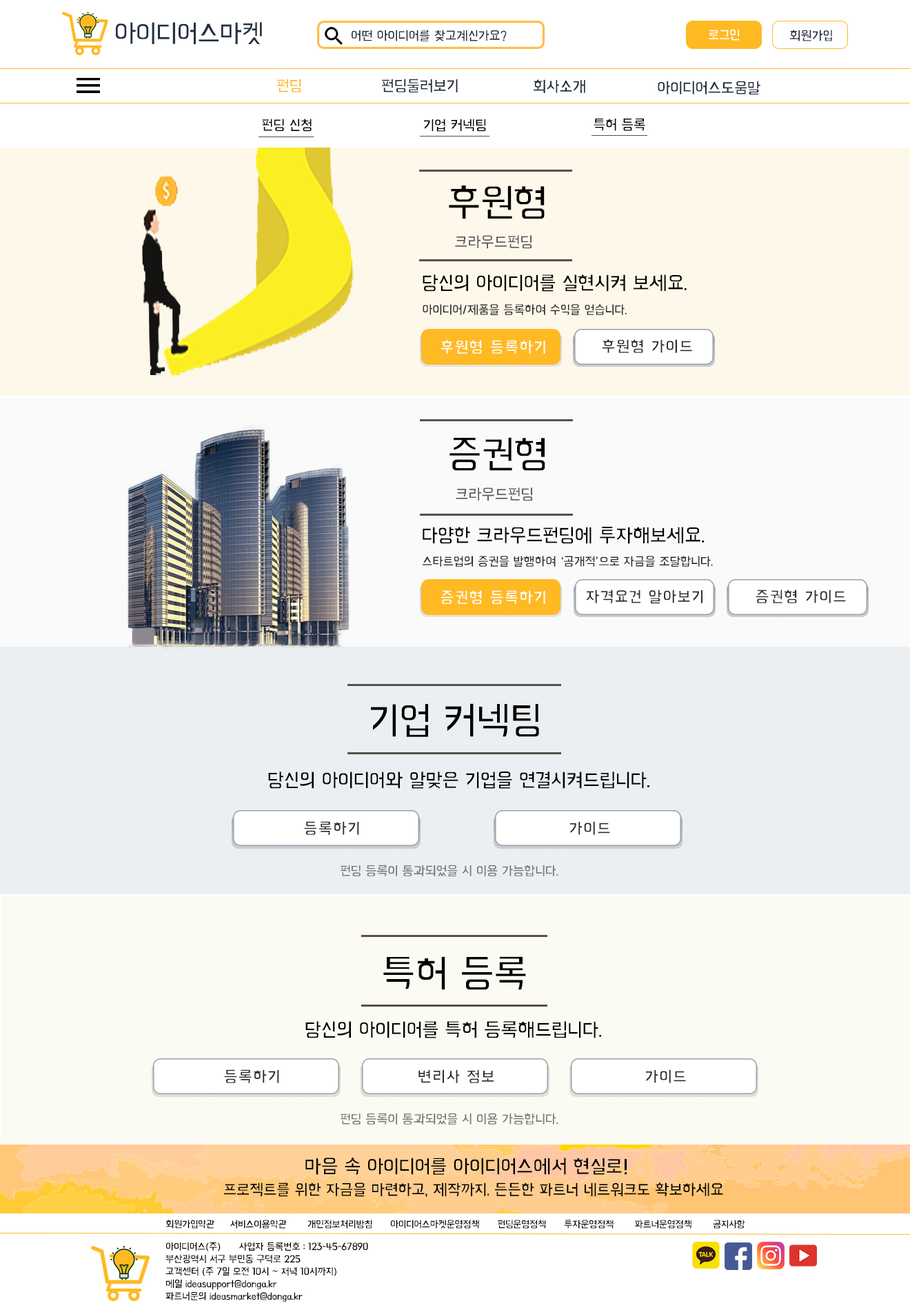
<style>
.page{position:relative;width:910px;height:1310px}
.page>*{position:absolute;margin:0}
.t1{font:27.6px "BMHANNAAir";letter-spacing:-0.03em;color:#233041}
.t2{font:13.8px "BMHANNAAir";letter-spacing:-0.02em;color:#202d3e}
.t3{font:13.8px "BMHANNAAir";letter-spacing:-0.02em;color:#ffffff}
.t4{font:16.5px "BMHANNAAir";letter-spacing:-0.02em;color:#ffb923}
.t5{font:16.5px "BMHANNAAir";letter-spacing:-0.02em;color:#202d3e}
.t6{font:15.2px "BMHANNAAir";letter-spacing:-0.02em;color:#000000}
.t7{font:41.4px "BMHANNAAir";letter-spacing:-0.02em;color:#000000}
.t8{font:16.5px "BMHANNAAir";letter-spacing:-0.02em;color:#5f5f5f}
.t9{font:20.7px "BMHANNAAir";letter-spacing:-0.02em;color:#000000}
.t10{font:13.1px "BMHANNAAir";letter-spacing:-0.02em;color:#2c2b2b}
.t11{font:16.5px "BMHANNAAir";letter-spacing:0.05em;color:#ffffff}
.t12{font:16.5px "BMHANNAAir";letter-spacing:0.05em;color:#2d2c2c}
.t13{font:13.8px "BMHANNAAir";letter-spacing:-0.02em;color:#777777}
.t14{font:10.3px "BMHANNAAir";letter-spacing:-0.025em;color:#000000}
.t15{font:10.3px "BMHANNAAir";letter-spacing:-0.02em;color:#000000}
</style>
<div class="page">
<p class="t1" style="left:116px;top:22px;width:146px;height:22px">아이디어스마켓</p>
<p class="t2" style="left:352px;top:30px;width:155px;height:11px">어떤 아이디어를 찾고계신가요?</p>
<p class="t3" style="left:709px;top:29px;width:30px;height:12px">로그인</p>
<p class="t2" style="left:790px;top:30px;width:42px;height:11px">회원가입</p>
<p class="t4" style="left:277px;top:79px;width:24px;height:13px">펀딩</p>
<p class="t5" style="left:382px;top:79px;width:76px;height:13px">펀딩둘러보기</p>
<p class="t5" style="left:534px;top:79px;width:51px;height:14px">회사소개</p>
<p class="t5" style="left:658px;top:81px;width:103px;height:13px">아이디어스도움말</p>
<p class="t6" style="left:262px;top:119px;width:50px;height:13px">펀딩 신청</p>
<p class="t6" style="left:424px;top:119px;width:62px;height:13px">기업 커넥팅</p>
<p class="t6" style="left:594px;top:119px;width:51px;height:12px">특허 등록</p>
<p class="t7" style="left:449px;top:185px;width:96px;height:34px">후원형</p>
<p class="t8" style="left:455px;top:235px;width:77px;height:14px">크라우드펀딩</p>
<p class="t9" style="left:423px;top:274px;width:264px;height:18px">당신의 아이디어를 실현시켜 보세요.</p>
<p class="t10" style="left:423px;top:304px;width:204px;height:11px">아이디어/제품을 등록하여 수익을 얻습니다.</p>
<p class="t11" style="left:441px;top:340px;width:104px;height:14px">후원형 등록하기</p>
<p class="t12" style="left:602px;top:339px;width:90px;height:14px">후원형 가이드</p>
<p class="t7" style="left:450px;top:437px;width:95px;height:34px">증권형</p>
<p class="t8" style="left:456px;top:487px;width:77px;height:14px">크라우드펀딩</p>
<p class="t9" style="left:423px;top:527px;width:281px;height:17px">다양한 크라우드펀딩에 투자해보세요.</p>
<p class="t10" style="left:423px;top:556px;width:290px;height:11px">스타트업의 증권을 발행하여 ‘공개적’으로 자금을 조달합니다.</p>
<p class="t11" style="left:441px;top:590px;width:104px;height:14px">증권형 등록하기</p>
<p class="t12" style="left:587px;top:590px;width:116px;height:14px">자격요건 알아보기</p>
<p class="t12" style="left:756px;top:590px;width:90px;height:13px">증권형 가이드</p>
<p class="t7" style="left:371px;top:703px;width:168px;height:34px">기업 커넥팅</p>
<p class="t9" style="left:268px;top:772px;width:382px;height:17px">당신의 아이디어와 알맞은 기업을 연결시켜드립니다.</p>
<p class="t12" style="left:304px;top:821px;width:55px;height:14px">등록하기</p>
<p class="t12" style="left:570px;top:821px;width:40px;height:14px">가이드</p>
<p class="t13" style="left:341px;top:865px;width:218px;height:11px">펀딩 등록이 통과되었을 시 이용 가능합니다.</p>
<p class="t7" style="left:383px;top:956px;width:143px;height:34px">특허 등록</p>
<p class="t9" style="left:305px;top:1021px;width:296px;height:17px">당신의 아이디어를 특허 등록해드립니다.</p>
<p class="t12" style="left:224px;top:1069px;width:55px;height:14px">등록하기</p>
<p class="t12" style="left:419px;top:1069px;width:75px;height:14px">변리사 정보</p>
<p class="t12" style="left:646px;top:1069px;width:40px;height:14px">가이드</p>
<p class="t13" style="left:341px;top:1113px;width:218px;height:12px">펀딩 등록이 통과되었을 시 이용 가능합니다.</p>
<p class="t14" style="left:165px;top:1220px;width:580px;height:9px">회원가입약관       서비스이용약관       개인정보처리방침      아이디어스마켓운영정책      펀딩운영정책      투자운영정책       파트너운영정책       공지사항</p>
<p class="t15" style="left:165px;top:1242px;width:203px;height:60px">아이디어스(주)      사업자 등록번호 : 123-45-67890  <br>부산광역시 서구 부민동 구덕로 225<br>고객센터 (주 7일 오전 10시 ~ 저녁 10시까지)<br>메일 ideasupport@donga.kr<br>파트너문의 ideasmarket@donga.kr</p>
</div>
